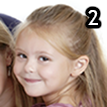
<style>
.page{position:relative;width:107px;height:107px}
.page>*{position:absolute;margin:0}
.t1{font:20.8px "TrebuchetMS";color:#ffffff}
</style>
<div class="page">
<p class="t1" style="left:88px;top:10px;width:10px;height:15px">2</p>
</div>
